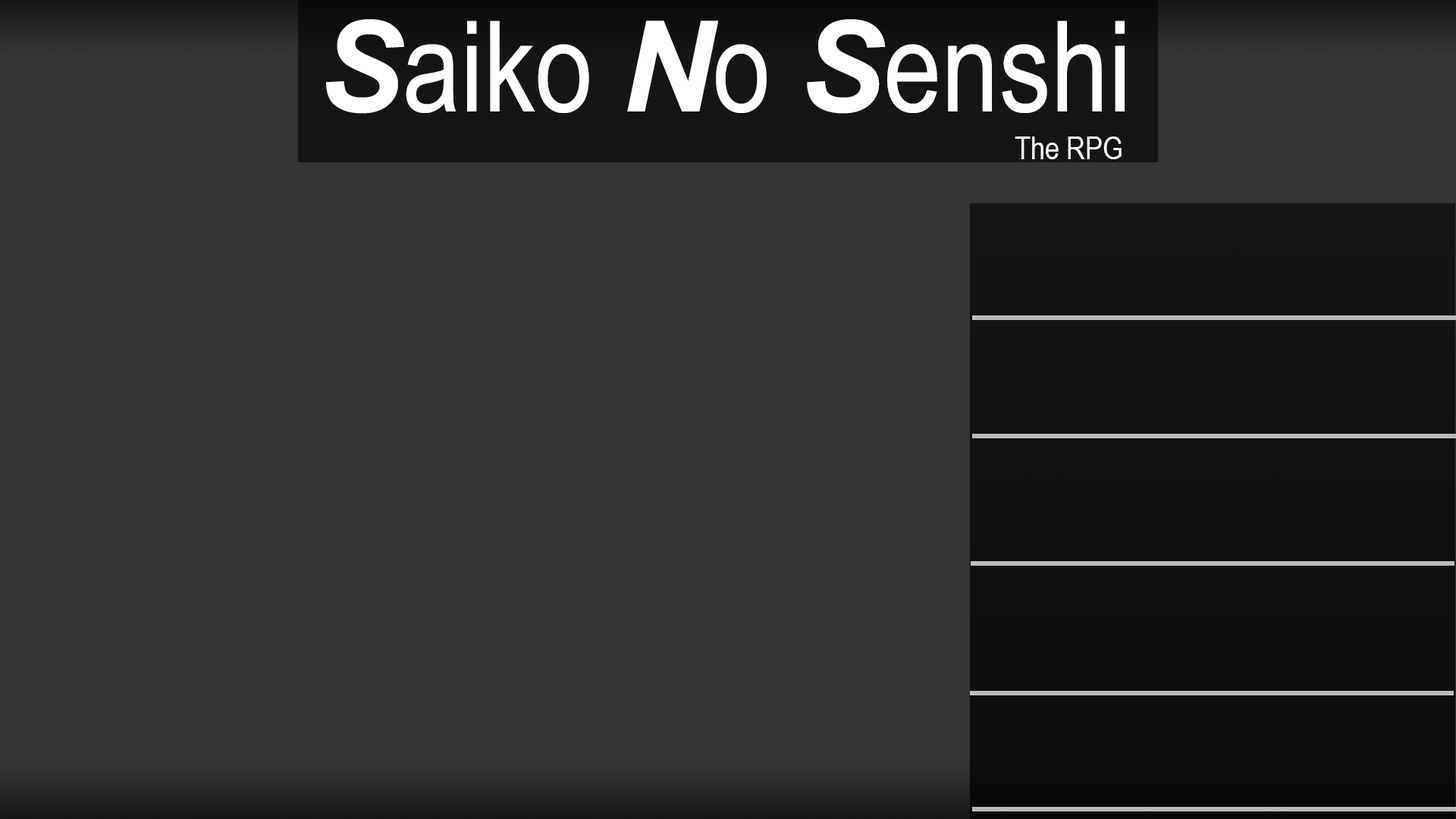
<style>
.page{position:relative;width:1456px;height:819px;background:#333333}
.page>*{position:absolute;margin:0}
.t1{font:126.4px "ArialNarrow";color:#ffffff}
.t2{font:126.4px "Arial-BoldItalicMT";color:#ffffff}
.t3{font:31.6px "ArialNarrow";color:#ffffff}
</style>
<div class="page">
<p class="t1" style="left:326px;top:19px;width:799px;height:95px"><span class="t2">S</span>aiko <span class="t2">N</span>o <span class="t2">S</span>enshi</p>
<p class="t3" style="left:1015px;top:136px;width:107px;height:23px">The RPG</p>
</div>
